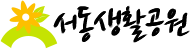
<style>
.page{position:relative;width:190px;height:49px;background:#ffffff}
.page>*{position:absolute;margin:0}
.t1{font:36px "NanumBrush";color:#000000}
</style>
<div class="page">
<p class="t1" style="left:53px;top:6px;width:135px;height:37px">서동생활공원</p>
<p class="t1" style="left:54px;top:6px;width:135px;height:37px">서동생활공원</p>
<p class="t1" style="left:54px;top:5px;width:135px;height:37px">서동생활공원</p>
<p class="t1" style="left:55px;top:5px;width:135px;height:37px">서동생활공원</p>
</div>
